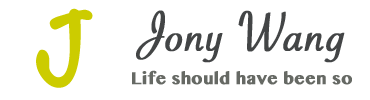
<style>
.page{position:relative;width:370px;height:100px;background:#ffffff}
.page>*{position:absolute;margin:0}
.t1{font:91.3px "Noteworthy-Bold";color:#cccc00;font-weight:bold}
.t2{font:60px "SavoyeLetPlain";color:#434546;font-weight:bold}
.t3{font:24px "SinhalaMN-Bold";color:#666964;font-weight:bold}
</style>
<div class="page">
<p class="t1" style="left:36px;top:8px;width:57px;height:80px">J</p>
<p class="t2" style="left:136px;top:10px;width:209px;height:53px">Jony Wang</p>
<p class="t3" style="left:132px;top:70px;width:220px;height:15px">Life should have been so</p>
</div>
